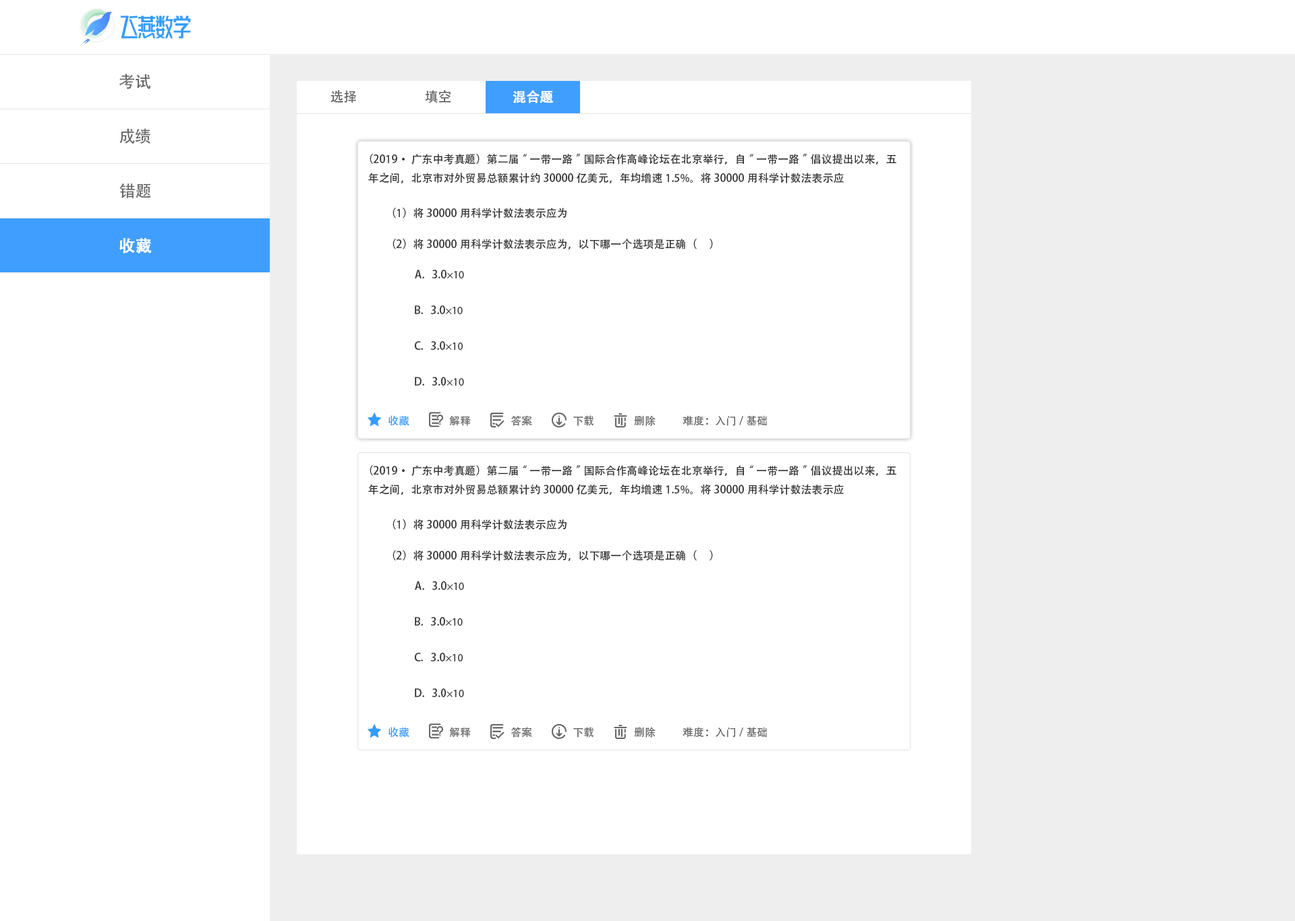
<style>
.page{position:relative;width:1295px;height:921px;background:#ffffff}
.page>*{position:absolute;margin:0}
.t1{font:16.2px "AdobeHeitiStd-Regular";color:#666666}
.t2{font:13.5px "AdobeHeitiStd-Regular";color:#666666}
.t3{font:13.5px "AdobeHeitiStd-Regular";color:#ffffff;font-weight:bold}
.t4{font:10.8px "AdobeHeitiStd-Regular";color:#333333}
.t5{font:16.2px "AdobeHeitiStd-Regular";color:#ffffff;font-weight:bold}
.t6{font:10.8px "MyriadPro-Regular";color:#333333}
.t7{font:10.8px "AdobeHeitiStd-Regular";color:#339dff}
.t8{font:10.8px "AdobeHeitiStd-Regular";color:#666666}
</style>
<div class="page">
<p class="t1" style="left:119px;top:73px;width:32px;height:16px">考试</p>
<p class="t2" style="left:330px;top:90px;width:27px;height:13px">选择</p>
<p class="t2" style="left:425px;top:90px;width:26px;height:13px">填空</p>
<p class="t3" style="left:512px;top:90px;width:42px;height:13px">混合题</p>
<p class="t1" style="left:119px;top:128px;width:31px;height:16px">成绩</p>
<p class="t4" style="left:368px;top:154px;width:528px;height:29px">（2019·广东中考真题）第二届“一带一路”国际合作高峰论坛在北京举行，自“一带一路”倡议提出以来，五年之间，北京市对外贸易总额累计约30000亿美元，年均增速1.5%。将30000用科学计数法表示应</p>
<p class="t1" style="left:119px;top:183px;width:32px;height:15px">错题</p>
<p class="t4" style="left:392px;top:208px;width:174px;height:10px">（1）将30000用科学计数法表示应为</p>
<p class="t5" style="left:119px;top:238px;width:33px;height:16px">收藏</p>
<p class="t4" style="left:392px;top:239px;width:321px;height:10px">（2）将30000用科学计数法表示应为，以下哪一个选项是正确（     ）</p>
<p class="t4" style="left:415px;top:270px;width:49px;height:8px">A.   3.0<span class="t6">×10</span></p>
<p class="t4" style="left:415px;top:305px;width:48px;height:9px">B.   3.0<span class="t6">×10</span></p>
<p class="t4" style="left:414px;top:341px;width:49px;height:9px">C.   3.0<span class="t6">×10</span></p>
<p class="t4" style="left:415px;top:377px;width:49px;height:9px">D.   3.0<span class="t6">×10</span></p>
<p class="t7" style="left:388px;top:415px;width:21px;height:11px">收藏</p>
<p class="t8" style="left:449px;top:415px;width:22px;height:11px">解释</p>
<p class="t8" style="left:510px;top:415px;width:22px;height:11px">答案</p>
<p class="t8" style="left:573px;top:415px;width:20px;height:11px">下载</p>
<p class="t8" style="left:634px;top:415px;width:21px;height:11px">删除</p>
<p class="t8" style="left:682px;top:415px;width:85px;height:11px">难度：入门/基础</p>
<p class="t4" style="left:368px;top:465px;width:528px;height:30px">（2019·广东中考真题）第二届“一带一路”国际合作高峰论坛在北京举行，自“一带一路”倡议提出以来，五年之间，北京市对外贸易总额累计约30000亿美元，年均增速1.5%。将30000用科学计数法表示应</p>
<p class="t4" style="left:392px;top:519px;width:174px;height:11px">（1）将30000用科学计数法表示应为</p>
<p class="t4" style="left:392px;top:550px;width:321px;height:11px">（2）将30000用科学计数法表示应为，以下哪一个选项是正确（     ）</p>
<p class="t4" style="left:415px;top:581px;width:49px;height:9px">A.   3.0<span class="t6">×10</span></p>
<p class="t4" style="left:415px;top:617px;width:48px;height:9px">B.   3.0<span class="t6">×10</span></p>
<p class="t4" style="left:414px;top:653px;width:49px;height:8px">C.   3.0<span class="t6">×10</span></p>
<p class="t4" style="left:415px;top:688px;width:49px;height:9px">D.   3.0<span class="t6">×10</span></p>
<p class="t7" style="left:388px;top:727px;width:21px;height:11px">收藏</p>
<p class="t8" style="left:449px;top:727px;width:22px;height:11px">解释</p>
<p class="t8" style="left:510px;top:727px;width:22px;height:11px">答案</p>
<p class="t8" style="left:573px;top:727px;width:20px;height:11px">下载</p>
<p class="t8" style="left:634px;top:727px;width:21px;height:11px">删除</p>
<p class="t8" style="left:682px;top:727px;width:85px;height:11px">难度：入门/基础</p>
</div>
